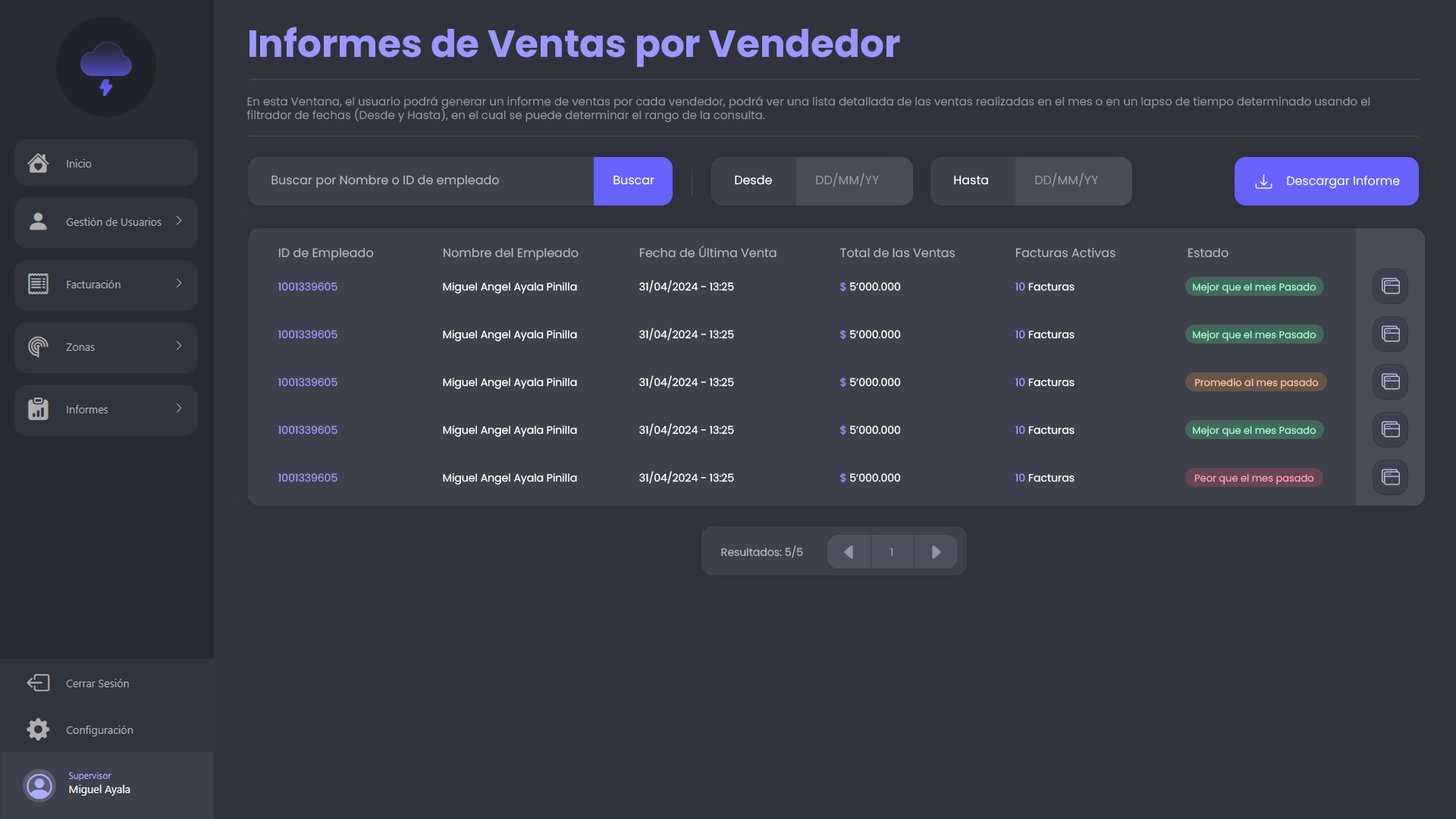
<style>
.page{position:relative;width:1456px;height:819px;background:#30333c}
.page>*{position:absolute;margin:0}
.t1{font:37.9px "Poppins-Bold";color:#9a98ff}
.t2{font:11.4px "Poppins-Regular";color:#8c92a6}
.t3{font:12.1px "Poppins-Regular";color:#9297a5}
.t4{font:12.1px "Poppins-Regular";color:#aeb5c8}
.t5{font:12.1px "Poppins-Regular";color:#ffffff}
.t6{font:10.6px "Poppins-Regular";color:#ffffff}
.t7{font:10.6px "Poppins-Regular";color:#9a98ff}
.t8{font:9.9px "Poppins-Regular";color:#9fffcf}
.t9{font:9.9px "Poppins-Regular";color:#ffc39f}
.t10{font:9.9px "Poppins-Regular";color:#ff9fb3}
.t11{font:10.6px "Poppins-Regular";color:#aeb5c8}
.t12{font:10.6px "Poppins-Regular";color:#959bac}
</style>
<div class="page">
<p class="t1" style="left:249px;top:27px;width:651px;height:40px">Informes de Ventas por Vendedor</p>
<p class="t2" style="left:246px;top:96px;width:1124px;height:27px">En esta Ventana, el usuario podrá generar un informe de ventas por cada vendedor, podrá ver una lista detallada de las ventas realizadas en el mes o en un lapso de tiempo determinado usando el <br>filtrador de fechas (Desde y Hasta), en el cual se puede determinar el rango de la consulta.</p>
<p class="t3" style="left:816px;top:172px;width:63px;height:15px">DD/MM/YY</p>
<p class="t3" style="left:1035px;top:172px;width:63px;height:15px">DD/MM/YY</p>
<p class="t4" style="left:271px;top:175px;width:228px;height:13px">Buscar por Nombre o ID de empleado</p>
<p class="t5" style="left:613px;top:175px;width:41px;height:10px">Buscar</p>
<p class="t5" style="left:735px;top:175px;width:37px;height:10px">Desde</p>
<p class="t5" style="left:954px;top:175px;width:34px;height:10px">Hasta</p>
<p class="t5" style="left:1287px;top:175px;width:113px;height:14px">Descargar Informe</p>
<p class="t4" style="left:639px;top:246px;width:138px;height:12px">Fecha de Última Venta</p>
<p class="t4" style="left:278px;top:248px;width:96px;height:13px">ID de Empleado</p>
<p class="t4" style="left:443px;top:248px;width:136px;height:13px">Nombre del Empleado</p>
<p class="t4" style="left:840px;top:248px;width:115px;height:10px">Total de las Ventas</p>
<p class="t4" style="left:1015px;top:247px;width:100px;height:11px">Facturas Activas</p>
<p class="t4" style="left:1188px;top:248px;width:40px;height:10px">Estado</p>
<p class="t6" style="left:639px;top:280px;width:95px;height:13px">31/04/2024 - 13:25</p>
<p class="t6" style="left:840px;top:281px;width:61px;height:11px"><span class="t7">$</span> 5’000.000</p>
<p class="t7" style="left:278px;top:282px;width:59px;height:9px">1001339605</p>
<p class="t6" style="left:443px;top:282px;width:134px;height:11px">Miguel Angel Ayala Pinilla</p>
<p class="t6" style="left:1015px;top:282px;width:60px;height:9px"><span class="t7">10</span> Facturas</p>
<p class="t8" style="left:1193px;top:283px;width:123px;height:10px">Mejor que el mes Pasado</p>
<p class="t7" style="left:278px;top:330px;width:59px;height:9px">1001339605</p>
<p class="t6" style="left:443px;top:330px;width:134px;height:11px">Miguel Angel Ayala Pinilla</p>
<p class="t6" style="left:639px;top:328px;width:95px;height:12px">31/04/2024 - 13:25</p>
<p class="t6" style="left:840px;top:329px;width:61px;height:11px"><span class="t7">$</span> 5’000.000</p>
<p class="t6" style="left:1015px;top:330px;width:60px;height:9px"><span class="t7">10</span> Facturas</p>
<p class="t8" style="left:1193px;top:331px;width:123px;height:10px">Mejor que el mes Pasado</p>
<p class="t7" style="left:278px;top:378px;width:59px;height:9px">1001339605</p>
<p class="t6" style="left:443px;top:378px;width:134px;height:11px">Miguel Angel Ayala Pinilla</p>
<p class="t6" style="left:639px;top:375px;width:95px;height:13px">31/04/2024 - 13:25</p>
<p class="t6" style="left:840px;top:377px;width:61px;height:11px"><span class="t7">$</span> 5’000.000</p>
<p class="t6" style="left:1015px;top:378px;width:60px;height:9px"><span class="t7">10</span> Facturas</p>
<p class="t9" style="left:1195px;top:378px;width:124px;height:11px">Promedio al mes pasado</p>
<p class="t7" style="left:278px;top:425px;width:59px;height:10px">1001339605</p>
<p class="t6" style="left:443px;top:425px;width:134px;height:12px">Miguel Angel Ayala Pinilla</p>
<p class="t6" style="left:639px;top:423px;width:95px;height:13px">31/04/2024 - 13:25</p>
<p class="t6" style="left:840px;top:425px;width:61px;height:10px"><span class="t7">$</span> 5’000.000</p>
<p class="t6" style="left:1015px;top:425px;width:60px;height:10px"><span class="t7">10</span> Facturas</p>
<p class="t8" style="left:1193px;top:426px;width:123px;height:11px">Mejor que el mes Pasado</p>
<p class="t7" style="left:278px;top:473px;width:59px;height:9px">1001339605</p>
<p class="t6" style="left:443px;top:473px;width:134px;height:12px">Miguel Angel Ayala Pinilla</p>
<p class="t6" style="left:639px;top:471px;width:95px;height:13px">31/04/2024 - 13:25</p>
<p class="t6" style="left:840px;top:472px;width:61px;height:11px"><span class="t7">$</span> 5’000.000</p>
<p class="t6" style="left:1015px;top:473px;width:60px;height:9px"><span class="t7">10</span> Facturas</p>
<p class="t10" style="left:1194px;top:474px;width:120px;height:11px">Peor que el mes pasado</p>
<p class="t11" style="left:721px;top:545px;width:82px;height:13px">Resultados: 5/5</p>
<p class="t12" style="left:890px;top:548px;width:3px;height:9px">1</p>
</div>
